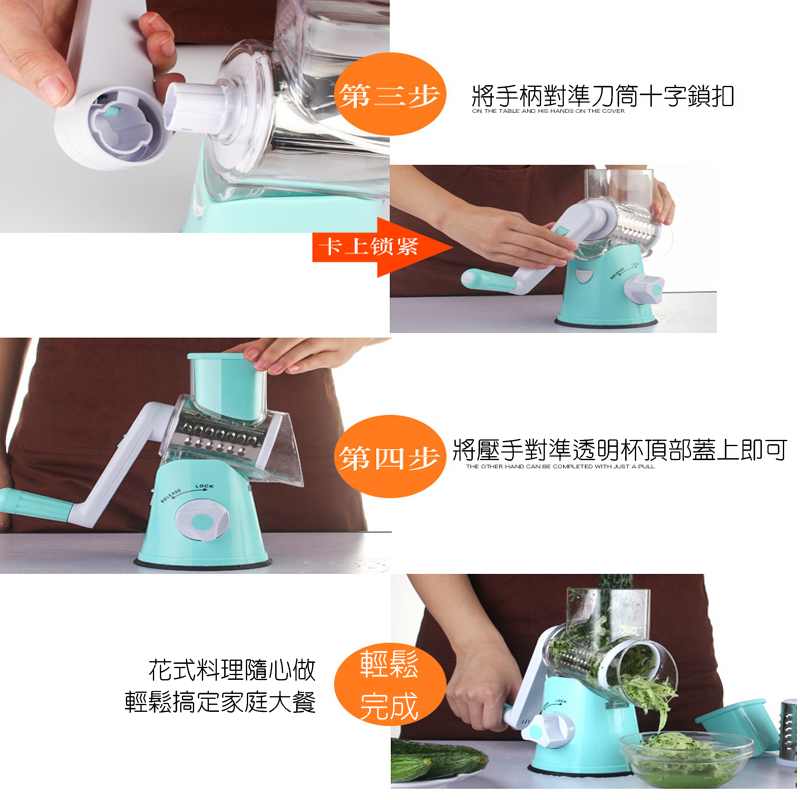
<style>
.page{position:relative;width:800px;height:800px;background:#ffffff}
.page>*{position:absolute;margin:0}
.t1{font:24px "HanWangYenLight";color:#000000}
.t2{font:30px "HanWangYenLight";color:#ffffff}
</style>
<div class="page">
<p class="t1" style="left:472px;top:84px;width:262px;height:23px">將手柄對準刀筒十字鎖扣</p>
<p class="t1" style="left:453px;top:438px;width:335px;height:23px">將壓手對準透明杯頂部蓋上即可</p>
<p class="t2" style="left:360px;top:650px;width:58px;height:70px">輕鬆<br>完成</p>
<p class="t1" style="left:124px;top:658px;width:192px;height:55px">花式料理隨心做<br>輕鬆搞定家庭大餐</p>
</div>
